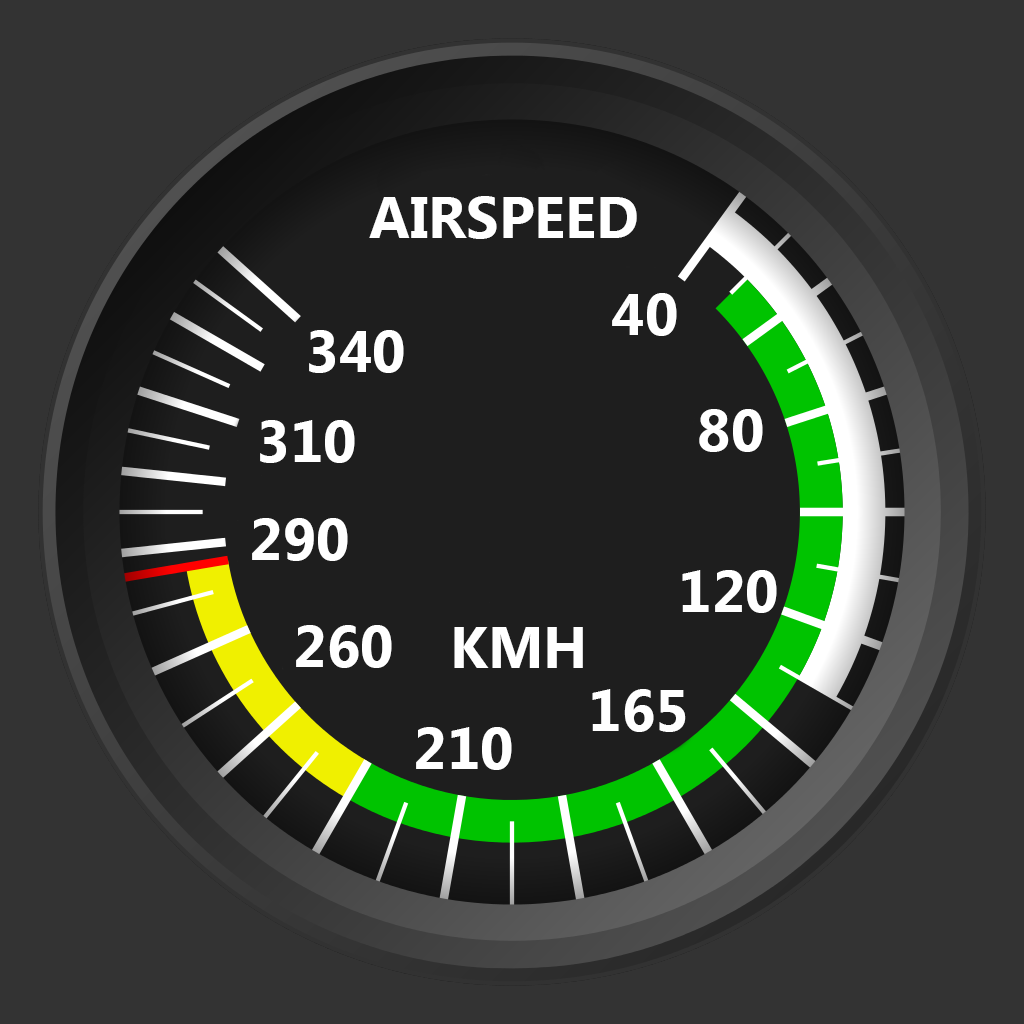
<style>
.page{position:relative;width:1024px;height:1024px;background:#333333}
.page>*{position:absolute;margin:0}
.t1{font:58px "MicrosoftTaiLe-Bold";color:#ffffff}
</style>
<div class="page">
<p class="t1" style="left:369px;top:196px;width:268px;height:43px">AIRSPEED</p>
<p class="t1" style="left:612px;top:293px;width:65px;height:43px">40</p>
<p class="t1" style="left:309px;top:330px;width:95px;height:43px">340</p>
<p class="t1" style="left:699px;top:409px;width:64px;height:43px">80</p>
<p class="t1" style="left:260px;top:420px;width:95px;height:43px">310</p>
<p class="t1" style="left:252px;top:518px;width:96px;height:43px">290</p>
<p class="t1" style="left:682px;top:570px;width:95px;height:43px">120</p>
<p class="t1" style="left:296px;top:625px;width:96px;height:43px">260</p>
<p class="t1" style="left:454px;top:627px;width:129px;height:41px">KMH</p>
<p class="t1" style="left:592px;top:689px;width:94px;height:43px">165</p>
<p class="t1" style="left:416px;top:727px;width:96px;height:43px">210</p>
</div>
